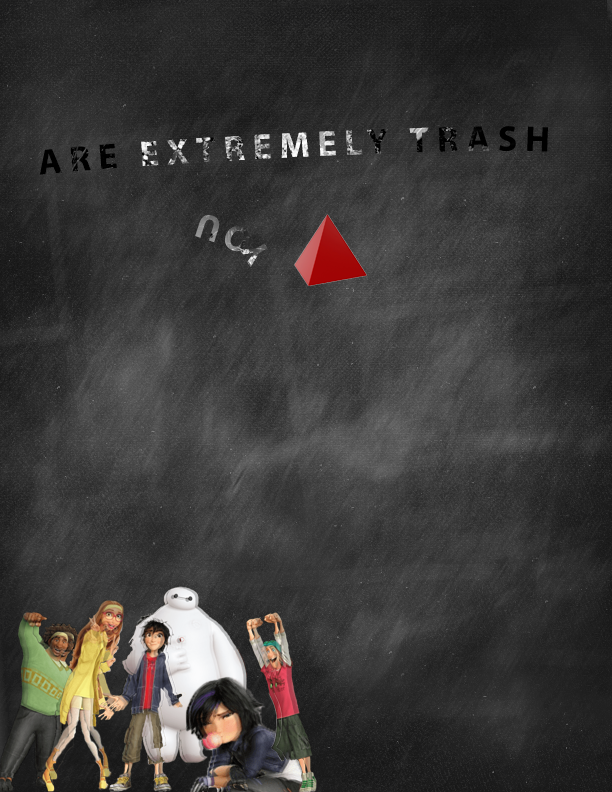
<style>
.page{position:relative;width:612px;height:792px}
.page>*{position:absolute;margin:0}
.t1{font:36px "MyriadPro-Bold";letter-spacing:0.21em;text-transform:uppercase}
</style>
<div class="page">
<p class="t1" style="left:39px;top:126px;width:509px;height:142px;text-align:center">you       are extremely trash</p>
</div>
